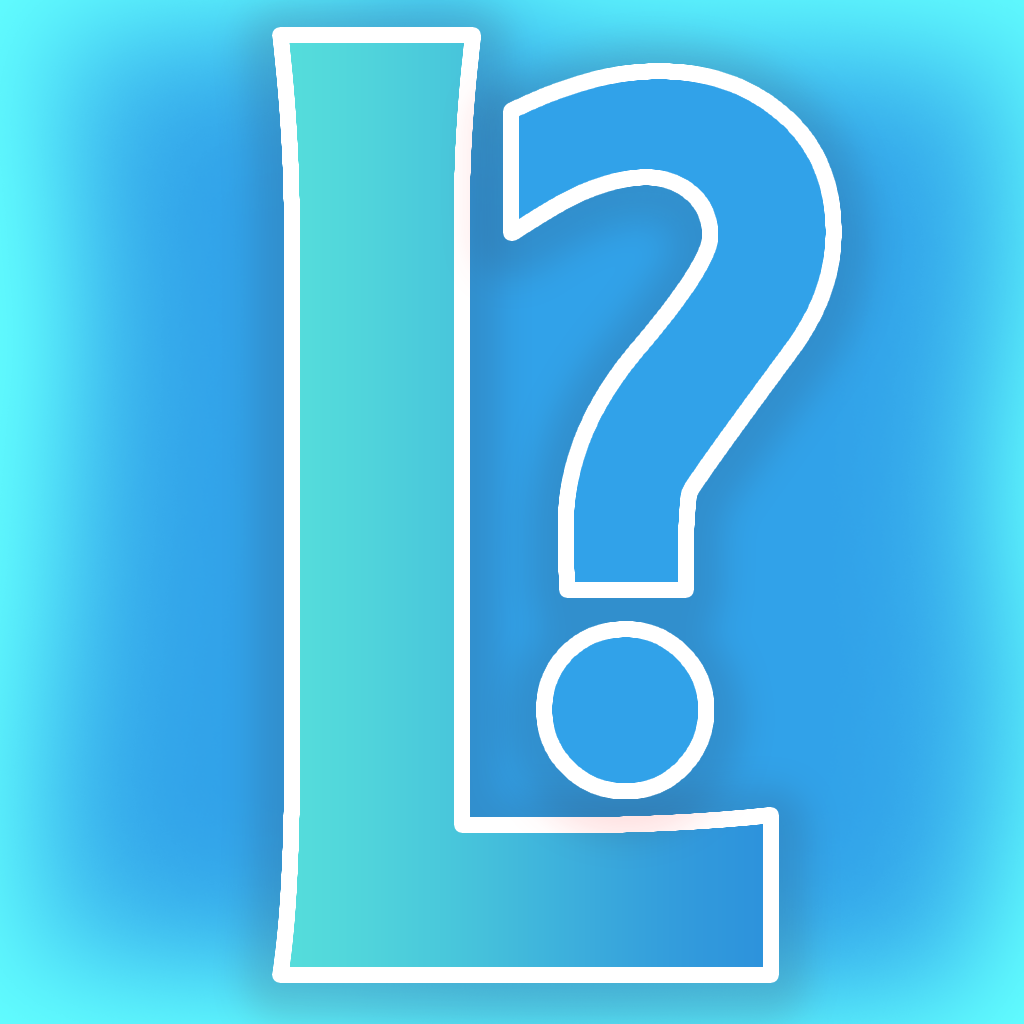
<style>
.page{position:relative;width:1024px;height:1024px}
.page>*{position:absolute;margin:0}
.t1{font:1440.7px "Arial-BoldItalicMT";color:#4ed1db}
.t2{font:1440.7px "ARESSENCE";color:#4ed1db}
.t3{font:1079.9px "ARESSENCE";color:#31a2e9}
</style>
<div class="page">
<p class="t1" style="left:280px;top:35px;width:491px;height:940px"><span class="t2">L</span>żżżżżżż</p>
<p class="t3" style="left:511px;top:71px;width:323px;height:720px">?</p>
</div>
